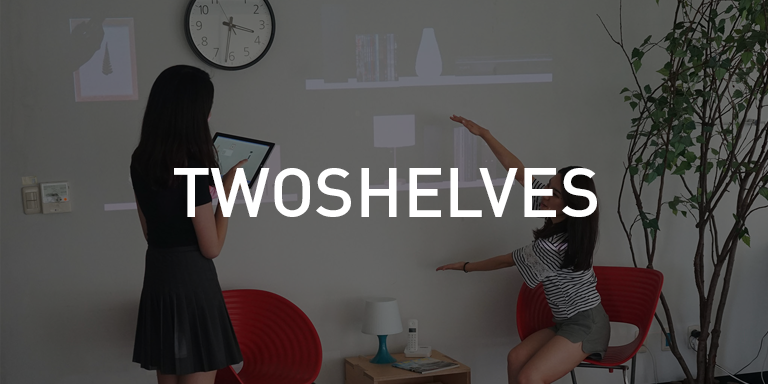
<style>
.page{position:relative;width:768px;height:384px}
.page>*{position:absolute;margin:0}
.t1{font:69px "DINPro-Medium";color:#ffffff}
</style>
<div class="page">
<p class="t1" style="left:174px;top:168px;width:423px;height:49px">TWOSHELVES</p>
</div>
